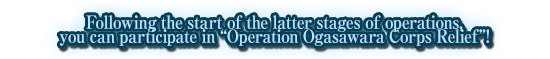
<style>
.page{position:relative;width:550px;height:59px}
.page>*{position:absolute;margin:0}
.t1{font:18px/14px "RyuminPro-ExBold";letter-spacing:-0.04em;color:#b9e0ff;scale:0.9 1}
</style>
<div class="page">
<p class="t1" style="left:59px;top:15px;width:430px;height:31px;text-align:center">Following the start of the latter stages of operations,<br>you can participate in “Operation Ogasawara Corps Relief”!</p>
</div>
